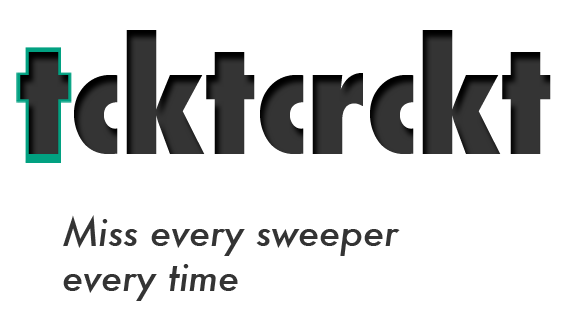
<style>
.page{position:relative;width:573px;height:336px;background:#ffffff}
.page>*{position:absolute;margin:0}
.t1{font:150px "Futura-CondensedExtraBold";color:#343434}
.t2{font:37.5px "Futura-MediumItalic";color:#343434}
</style>
<div class="page">
<p class="t1" style="left:20px;top:30px;width:531px;height:124px">tcktcrckt</p>
<p class="t2" style="left:63px;top:215px;width:337px;height:86px">Miss every sweeper<br>every time</p>
</div>
